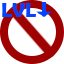
<style>
.page{position:relative;width:64px;height:64px;background:#ffffff}
.page>*{position:absolute;margin:0}
.t1{font:20px "BerlinSansFBDemi-Bold";color:#0544ff}
</style>
<div class="page">
<p class="t1" style="left:2px;top:3px;width:34px;height:14px">LVL</p>
</div>
